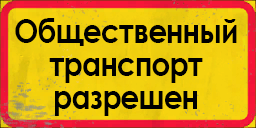
<style>
.page{position:relative;width:256px;height:128px}
.page>*{position:absolute;margin:0}
.t1{font:33.6px/33px "CenturyGothic-Bold";letter-spacing:-0.02em;color:#000000;scale:0.85 1}
</style>
<div class="page">
<p class="t1" style="left:15px;top:18px;width:222px;height:98px;text-align:center">Общественный<br>транспорт<br>разрешен</p>
</div>
